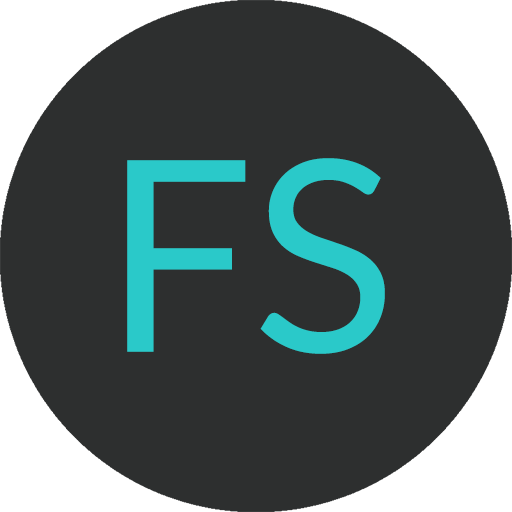
<style>
.page{position:relative;width:512px;height:512px;background:#2d2f2f}
.page>*{position:absolute;margin:0}
.t1{font:266.7px "Lato-Regular";letter-spacing:0.01em;color:#2ac9c9}
</style>
<div class="page">
<p class="t1" style="left:127px;top:158px;width:258px;height:196px">FS</p>
</div>
